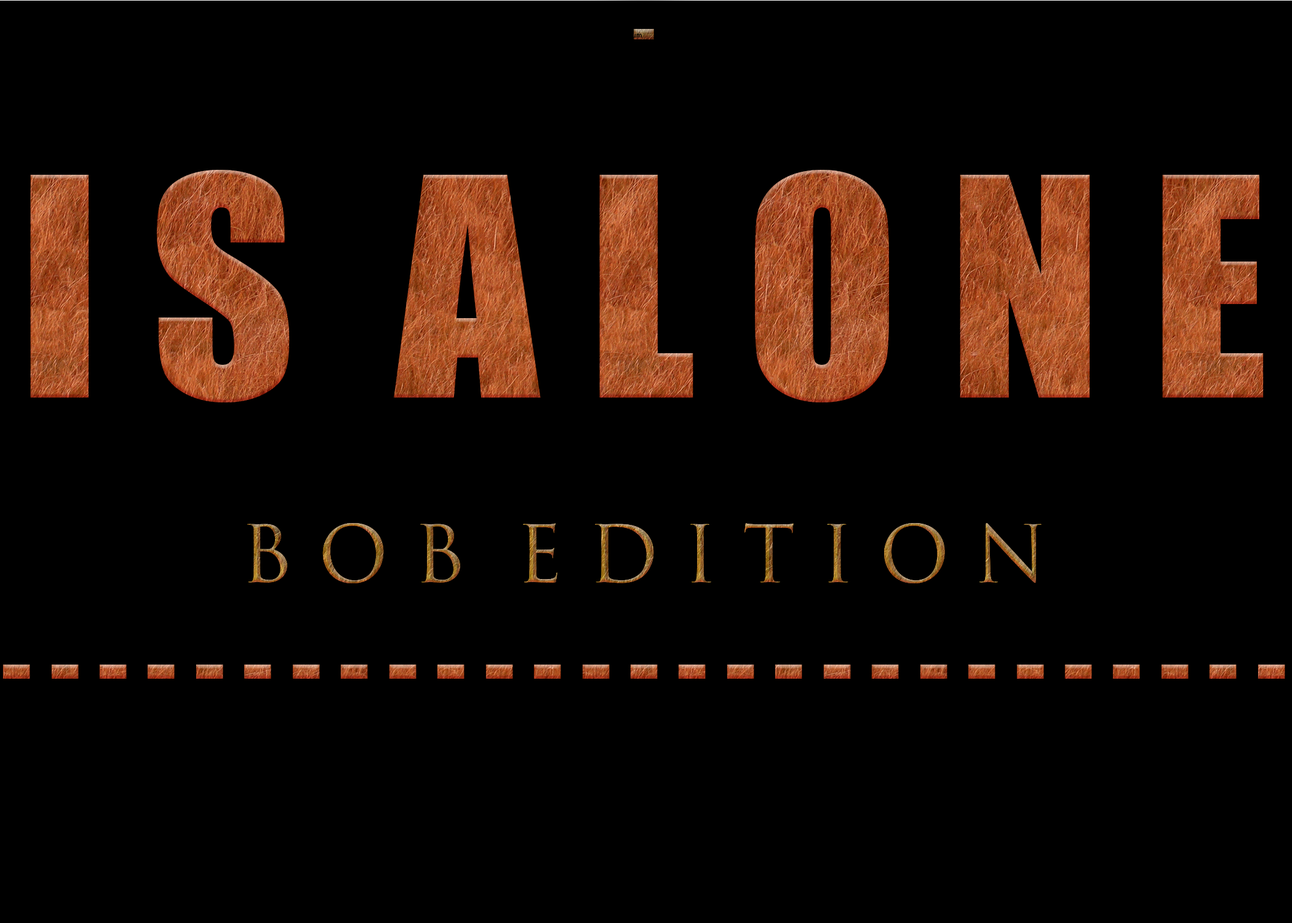
<style>
.page{position:relative;width:1292px;height:923px;background:#000000}
.page>*{position:absolute;margin:0}
.t1{font:102.5px "Impact"}
.t2{font:76.9px "Impact"}
.t3{font:282px "Impact"}
.t4{font:76.9px "TrajanColor-Concept"}
</style>
<div class="page">
<p class="t1" style="left:2px;top:29px;width:1283px;height:650px;text-align:center"><span class="t2">-<br></span><span class="t3">I S  A L O N E<br></span><span class="t4"><br>B O B  E D I T I O N<br></span>- - - - - - - - - - - - - - - - - - - - - - - - - - -</p>
</div>
